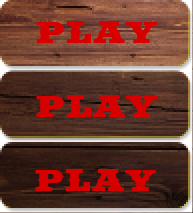
<style>
.page{position:relative;width:193px;height:213px}
.page>*{position:absolute;margin:0}
.t1{font:41px "Saddlebag-Black";color:#d60000}
</style>
<div class="page">
<p class="t1" style="left:36px;top:21px;width:121px;height:22px">PLAY</p>
<p class="t1" style="left:36px;top:95px;width:121px;height:22px">PLAY</p>
<p class="t1" style="left:35px;top:169px;width:121px;height:22px">PLAY</p>
</div>
